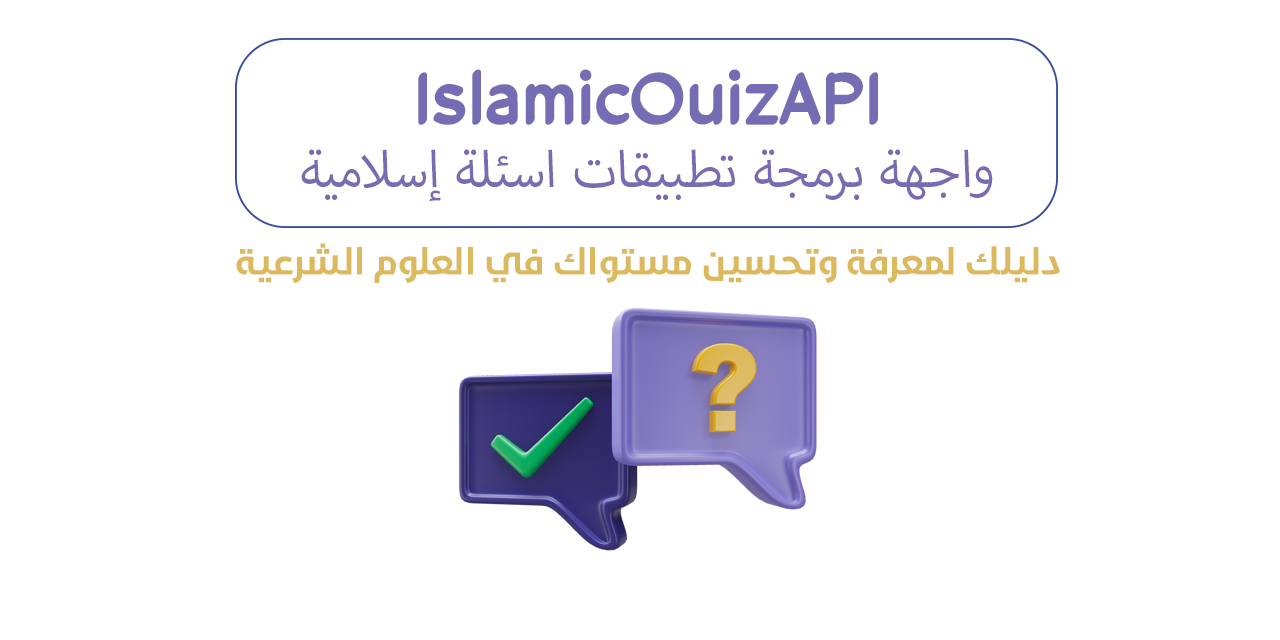
<style>
.page{position:relative;width:1280px;height:640px;background:#ffffff}
.page>*{position:absolute;margin:0}
.t1{font:72px "aAntiCorona";color:#756db3}
.t2{font:72px "MyriadArabic-Regular";color:#756db3}
.t3{font:36px "Noor-Bold";color:#ddb95e}
</style>
<div class="page">
<p class="t1" style="left:418px;top:69px;width:460px;height:56px">IslamicQuizAPI</p>
<p class="t2" style="left:301px;top:149px;width:692px;height:53px">واجهة برمجة تطبيقات اسئلة إسلامية</p>
<p class="t3" style="left:236px;top:243px;width:824px;height:40px">دليلك لمعرفة وتحسين مستواك في العلوم الشرعية</p>
</div>
